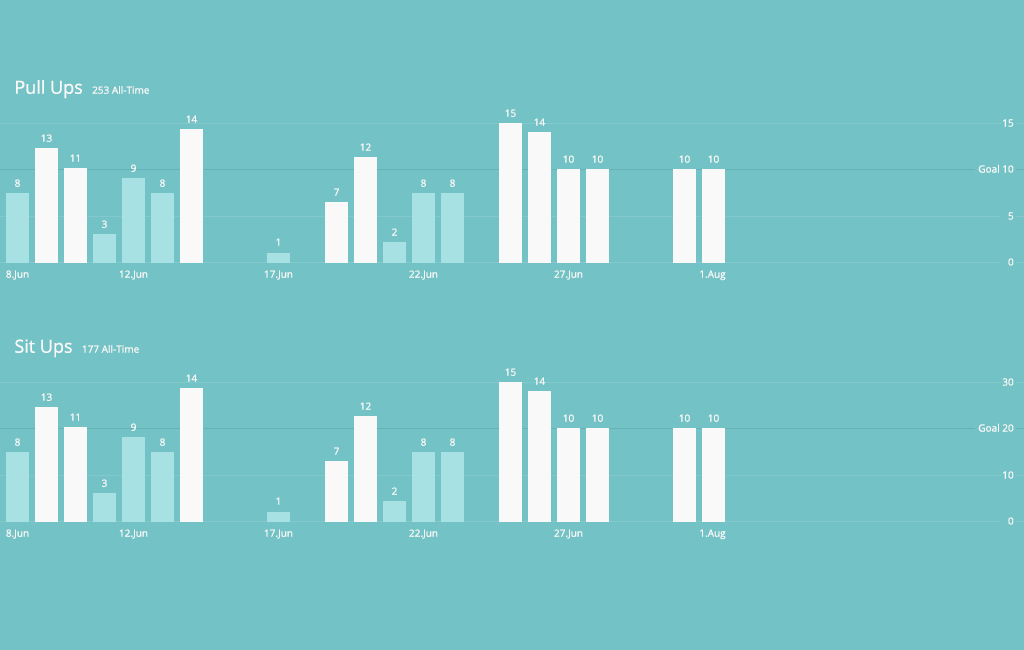
<style>
.page{position:relative;width:1024px;height:650px;background:#73c2c5}
.page>*{position:absolute;margin:0}
.t1{font:10px "OpenSans";color:#f9f9f9}
.t2{font:18px "OpenSans";color:#f9f9f9}
</style>
<div class="page">
<p class="t1" style="left:16px;top:80px;width:133px;height:19px"><span class="t2">Pull Ups  </span>253 All-Time</p>
<p class="t1" style="left:505px;top:109px;width:11px;height:8px">15</p>
<p class="t1" style="left:186px;top:115px;width:12px;height:8px">14</p>
<p class="t1" style="left:534px;top:118px;width:12px;height:8px">14</p>
<p class="t1" style="left:1003px;top:119px;width:11px;height:8px">15</p>
<p class="t1" style="left:41px;top:134px;width:11px;height:8px">13</p>
<p class="t1" style="left:360px;top:143px;width:11px;height:8px">12</p>
<p class="t1" style="left:70px;top:154px;width:9px;height:8px">11</p>
<p class="t1" style="left:563px;top:155px;width:11px;height:8px">10</p>
<p class="t1" style="left:592px;top:155px;width:11px;height:8px">10</p>
<p class="t1" style="left:679px;top:155px;width:11px;height:8px">10</p>
<p class="t1" style="left:708px;top:155px;width:11px;height:8px">10</p>
<p class="t1" style="left:131px;top:164px;width:5px;height:8px">9</p>
<p class="t1" style="left:978px;top:164px;width:36px;height:9px">Goal 10</p>
<p class="t1" style="left:15px;top:179px;width:5px;height:8px">8</p>
<p class="t1" style="left:160px;top:179px;width:5px;height:8px">8</p>
<p class="t1" style="left:421px;top:179px;width:5px;height:8px">8</p>
<p class="t1" style="left:450px;top:179px;width:5px;height:8px">8</p>
<p class="t1" style="left:334px;top:188px;width:5px;height:8px">7</p>
<p class="t1" style="left:102px;top:220px;width:5px;height:8px">3</p>
<p class="t1" style="left:1008px;top:212px;width:6px;height:8px">5</p>
<p class="t1" style="left:392px;top:228px;width:5px;height:8px">2</p>
<p class="t1" style="left:276px;top:238px;width:4px;height:8px">1</p>
<p class="t1" style="left:6px;top:270px;width:23px;height:10px">8.Jun</p>
<p class="t1" style="left:119px;top:270px;width:29px;height:10px">12.Jun</p>
<p class="t1" style="left:264px;top:270px;width:29px;height:10px">17.Jun</p>
<p class="t1" style="left:409px;top:270px;width:29px;height:10px">22.Jun</p>
<p class="t1" style="left:554px;top:270px;width:29px;height:10px">27.Jun</p>
<p class="t1" style="left:700px;top:270px;width:26px;height:11px">1.Aug</p>
<p class="t1" style="left:1008px;top:258px;width:6px;height:8px">0</p>
<p class="t1" style="left:15px;top:339px;width:124px;height:19px"><span class="t2">Sit Ups  </span>177 All-Time</p>
<p class="t1" style="left:186px;top:374px;width:12px;height:8px">14</p>
<p class="t1" style="left:505px;top:368px;width:11px;height:8px">15</p>
<p class="t1" style="left:534px;top:377px;width:12px;height:8px">14</p>
<p class="t1" style="left:1002px;top:378px;width:12px;height:8px">30</p>
<p class="t1" style="left:41px;top:393px;width:11px;height:8px">13</p>
<p class="t1" style="left:70px;top:413px;width:9px;height:8px">11</p>
<p class="t1" style="left:360px;top:402px;width:11px;height:8px">12</p>
<p class="t1" style="left:563px;top:414px;width:11px;height:8px">10</p>
<p class="t1" style="left:592px;top:414px;width:11px;height:8px">10</p>
<p class="t1" style="left:679px;top:414px;width:11px;height:8px">10</p>
<p class="t1" style="left:708px;top:414px;width:11px;height:8px">10</p>
<p class="t1" style="left:131px;top:423px;width:5px;height:8px">9</p>
<p class="t1" style="left:978px;top:423px;width:36px;height:9px">Goal 20</p>
<p class="t1" style="left:15px;top:438px;width:5px;height:8px">8</p>
<p class="t1" style="left:160px;top:438px;width:5px;height:8px">8</p>
<p class="t1" style="left:421px;top:438px;width:5px;height:8px">8</p>
<p class="t1" style="left:450px;top:438px;width:5px;height:8px">8</p>
<p class="t1" style="left:334px;top:447px;width:5px;height:8px">7</p>
<p class="t1" style="left:1003px;top:471px;width:11px;height:8px">10</p>
<p class="t1" style="left:102px;top:479px;width:5px;height:8px">3</p>
<p class="t1" style="left:276px;top:497px;width:4px;height:8px">1</p>
<p class="t1" style="left:392px;top:487px;width:5px;height:8px">2</p>
<p class="t1" style="left:1008px;top:517px;width:6px;height:8px">0</p>
<p class="t1" style="left:6px;top:529px;width:23px;height:10px">8.Jun</p>
<p class="t1" style="left:119px;top:529px;width:29px;height:10px">12.Jun</p>
<p class="t1" style="left:264px;top:529px;width:29px;height:10px">17.Jun</p>
<p class="t1" style="left:409px;top:529px;width:29px;height:10px">22.Jun</p>
<p class="t1" style="left:554px;top:529px;width:29px;height:10px">27.Jun</p>
<p class="t1" style="left:700px;top:529px;width:26px;height:11px">1.Aug</p>
</div>
